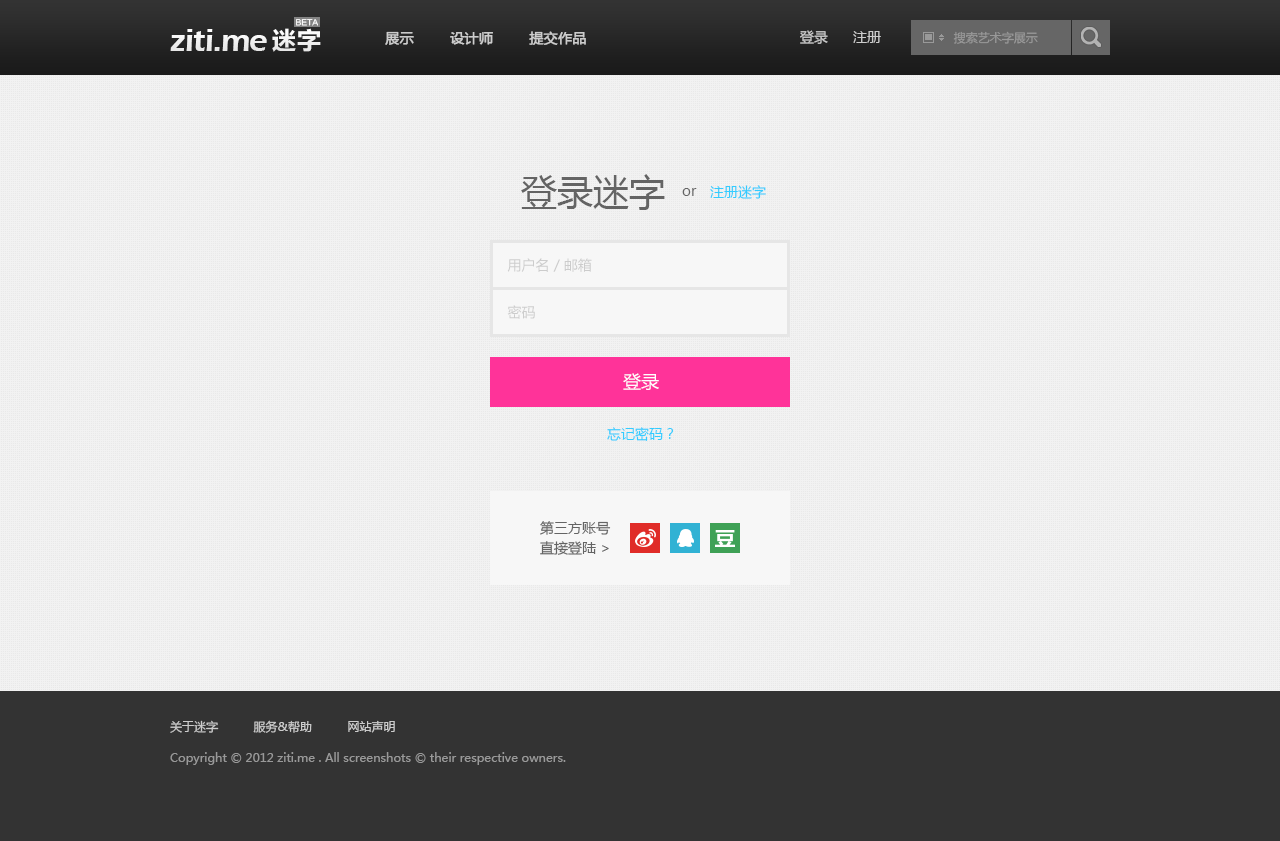
<style>
.page{position:relative;width:1280px;height:841px;background:#f2f2f2}
.page>*{position:absolute;margin:0}
.t1{font:33.3px "ErasITC-Demi";letter-spacing:-0.025em;color:#efefef}
.t2{font:25px "FZLTCHK--GBK1-0";color:#f2f2f2}
.t3{font:7.7px "FZLTHK--GBK1-0";color:#ffffff;text-transform:uppercase}
.t4{font:14px "MicrosoftYaHei";color:#cccccc}
.t5{font:14px "MicrosoftYaHei";color:#cccccc;font-weight:bold}
.t6{font:12px "MicrosoftYaHei";color:#999999}
.t7{font:36px "MicrosoftYaHei";color:#646464}
.t8{font:14px "MicrosoftYaHei";color:#33ccff}
.t9{font:14px "MicrosoftYaHei";color:#646464}
.t10{font:18px "MicrosoftYaHei";color:#ffffff}
.t11{font:14px/20px "MicrosoftYaHei";color:#646464}
.t12{font:12px "MicrosoftYaHei";color:#cccccc}
</style>
<div class="page">
<p class="t1" style="left:170px;top:29px;width:97px;height:22px">ziti.me</p>
<p class="t2" style="left:272px;top:28px;width:49px;height:24px">迷字</p>
<p class="t3" style="left:296px;top:19px;width:22px;height:7px">beta</p>
<p class="t4" style="left:800px;top:30px;width:81px;height:14px">登录      注册</p>
<p class="t5" style="left:385px;top:31px;width:201px;height:14px">展示        设计师        提交作品</p>
<p class="t6" style="left:953px;top:31px;width:85px;height:13px">搜索艺术字展示</p>
<p class="t7" style="left:521px;top:174px;width:144px;height:36px">登录迷字</p>
<p class="t8" style="left:710px;top:185px;width:56px;height:14px">注册迷字</p>
<p class="t9" style="left:682px;top:188px;width:15px;height:8px">or</p>
<p class="t4" style="left:507px;top:258px;width:85px;height:14px">用户名 / 邮箱</p>
<p class="t4" style="left:507px;top:305px;width:28px;height:14px">密码</p>
<p class="t10" style="left:623px;top:373px;width:36px;height:17px">登录</p>
<p class="t8" style="left:607px;top:427px;width:67px;height:14px">忘记密码？</p>
<p class="t11" style="left:540px;top:521px;width:71px;height:34px">第三方账号<br>直接登陆 &gt;</p>
<p class="t12" style="left:170px;top:720px;width:225px;height:13px">关于迷字          服务&amp;帮助          网站声明</p>
<p class="t6" style="left:170px;top:752px;width:396px;height:13px">Copyright © 2012 ziti.me . All screenshots © their respective owners.</p>
</div>
